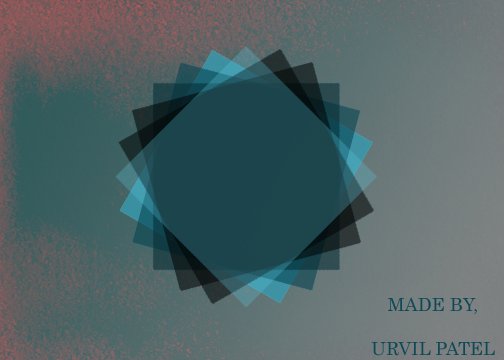
<style>
.page{position:relative;width:504px;height:360px}
.page>*{position:absolute;margin:0}
.t1{font:18px "Century";color:#0c4855}
</style>
<div class="page">
<p class="t1" style="left:371px;top:297px;width:124px;height:59px;text-align:center">MADE BY,<br><br>URVIL PATEL</p>
</div>
